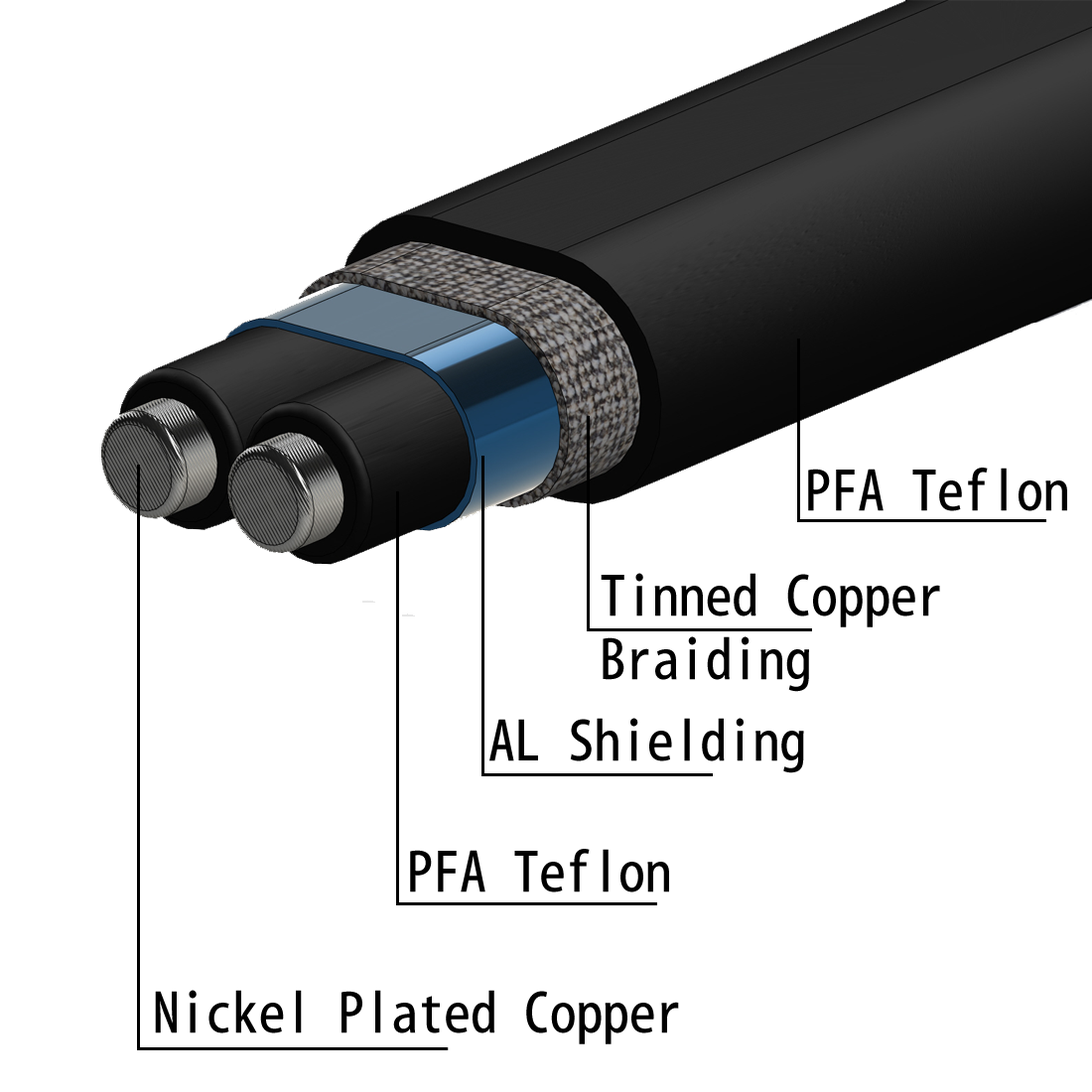
<style>
.page{position:relative;width:1092px;height:1092px;background:#ffffff}
.page>*{position:absolute;margin:0}
.t1{font:52.9px "AdobeFanHeitiStd-Bold";color:#000000}
</style>
<div class="page">
<p class="t1" style="left:808px;top:468px;width:259px;height:43px">PFA Teflon</p>
<p class="t1" style="left:601px;top:573px;width:339px;height:119px">Tinned Copper<br>Braiding</p>
<p class="t1" style="left:489px;top:718px;width:315px;height:55px">AL Shielding</p>
<p class="t1" style="left:410px;top:849px;width:259px;height:43px">PFA Teflon</p>
<p class="t1" style="left:155px;top:990px;width:524px;height:54px">Nickel Plated Copper</p>
</div>
